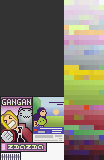
<style>
.page{position:relative;width:104px;height:160px;background:#333333}
.page>*{position:absolute;margin:0}
.t1{font:10px "RetroSans";letter-spacing:-0.4em;text-transform:uppercase}
</style>
<div class="page">
<p class="t1" style="left:8px;top:145px;width:35px;height:4px;rotate:90deg">gangan</p>
</div>
